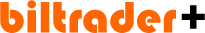
<style>
.page{position:relative;width:205px;height:33px;background:#ffffff}
.page>*{position:absolute;margin:0}
.t1{font:45.7px "Bauhaus93";color:#ff6600}
.t2{font:45.7px "Bauhaus93";color:#000000}
</style>
<div class="page">
<p class="t1" style="left:0px;top:0px;width:205px;height:33px">biltrader<span class="t2">+</span></p>
</div>
